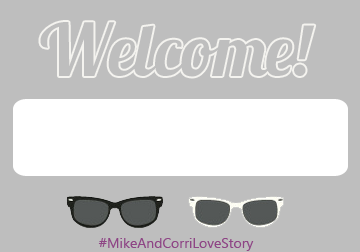
<style>
.page{position:relative;width:360px;height:252px;background:#bebebe}
.page>*{position:absolute;margin:0}
.t1{font:72px "Lobster1.3";color:#bebebe}
.t2{font:14px "LaoUI";color:#8e4585}
</style>
<div class="page">
<p class="t1" style="left:40px;top:22px;width:275px;height:55px">Welcome!</p>
<p class="t2" style="left:98px;top:238px;width:156px;height:13px">#MikeAndCorriLoveStory</p>
</div>
